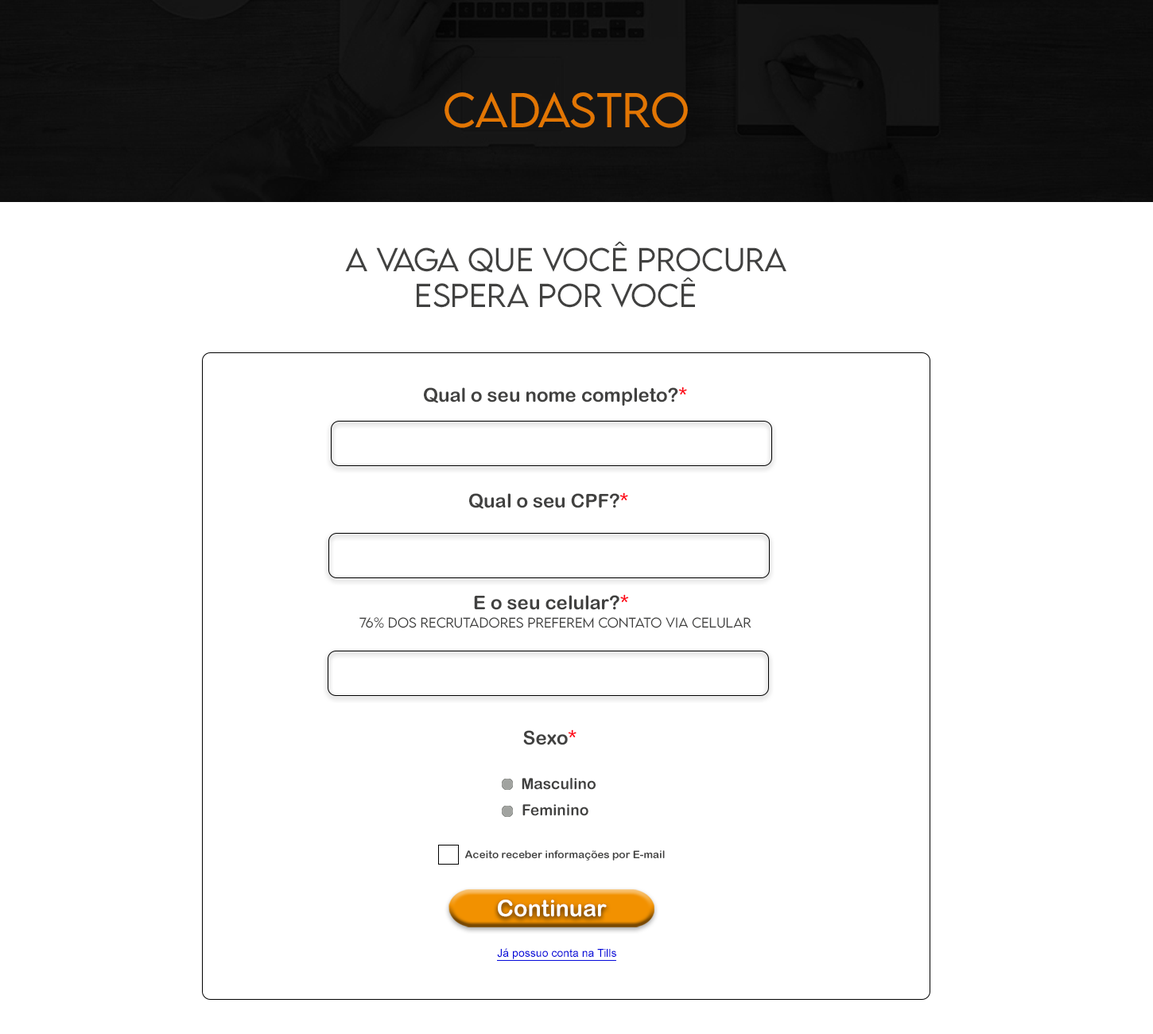
<style>
.page{position:relative;width:1153px;height:1034px;background:#ffffff}
.page>*{position:absolute;margin:0}
.t1{font:43.6px "LEMONMILK-Light";color:#e27603}
.t2{font:29.5px "LEMONMILK-Light";color:#414140}
.t3{font:19.1px "ArialRoundedMTBold";color:#414140}
.t4{font:19.1px "ArialRoundedMTBold";color:#fe0416}
.t5{font:12.7px "LEMONMILK-Light";color:#414140}
.t6{font:15.3px "ArialRoundedMTBold";color:#414140}
.t7{font:10.7px "ArialRoundedMTBold";color:#414140}
.t8{font:22.8px "ArialRoundedMTBold";color:#fefefb}
.t9{font:11.2px "ArialMT";color:#0409da}
</style>
<div class="page">
<p class="t1" style="left:445px;top:92px;width:243px;height:36px">CADASTRO</p>
<p class="t2" style="left:345px;top:241px;width:442px;height:67px;text-align:justify">A vaga que você procura<br>        espera por você</p>
<p class="t3" style="left:424px;top:387px;width:263px;height:19px">Qual o seu nome completo?<span class="t4">*</span></p>
<p class="t3" style="left:469px;top:492px;width:159px;height:17px">Qual o seu CPF?<span class="t4">*</span></p>
<p class="t3" style="left:474px;top:594px;width:155px;height:16px">E o seu celular?<span class="t4">*</span></p>
<p class="t5" style="left:360px;top:617px;width:392px;height:11px">76% dos recrutadores preferem contato via celular</p>
<p class="t3" style="left:523px;top:729px;width:54px;height:16px">Sexo<span class="t4">*</span></p>
<p class="t6" style="left:522px;top:778px;width:74px;height:12px">Masculino</p>
<p class="t6" style="left:523px;top:804px;width:66px;height:12px">Feminino</p>
<p class="t7" style="left:465px;top:850px;width:200px;height:11px">Aceito receber informações por E-mail</p>
<p class="t8" style="left:498px;top:900px;width:109px;height:17px">Continuar</p>
<p class="t9" style="left:497px;top:948px;width:119px;height:11px">Já possuo conta na Tills</p>
</div>
